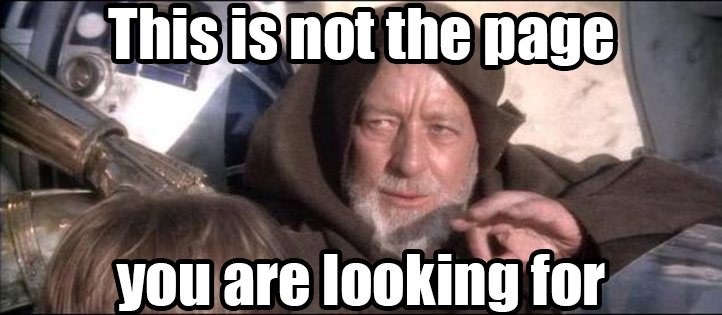
<style>
.page{position:relative;width:722px;height:315px}
.page>*{position:absolute;margin:0}
.t1{font:64px "Impact";color:#ffffff}
</style>
<div class="page">
<p class="t1" style="left:108px;top:8px;width:505px;height:58px">This is not the page</p>
<p class="t1" style="left:116px;top:254px;width:489px;height:58px">you are looking for</p>
</div>
